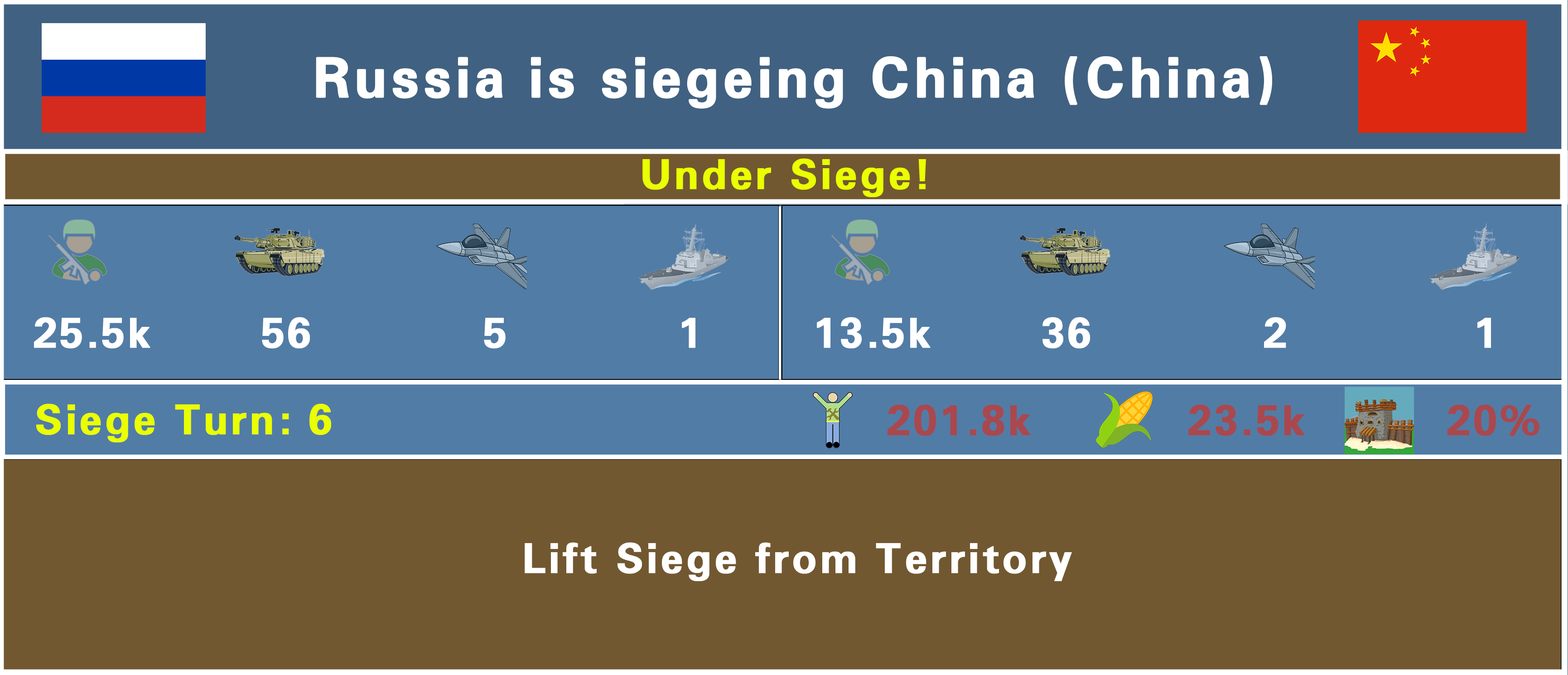
<style>
.page{position:relative;width:1568px;height:675px;background:#725830}
.page>*{position:absolute;margin:0}
.t1{font:54.4px "FreeUniversal-Bold";letter-spacing:0.05em;color:#ffffff;font-weight:bold}
.t2{font:40.8px "FreeUniversal-Bold";letter-spacing:0.05em;color:#eaff00;font-weight:bold}
.t3{font:40.8px "FreeUniversal-Bold";letter-spacing:0.05em;color:#ffffff;font-weight:bold}
.t4{font:40.8px "FreeUniversal-Bold";letter-spacing:0.05em;color:#a9484e;font-weight:bold}
</style>
<div class="page">
<p class="t1" style="left:284px;top:56px;width:989px;height:53px">Russia is attacking China (China)</p>
<p class="t1" style="left:316px;top:56px;width:957px;height:53px">Russia is siegeing China (China)</p>
<p class="t2" style="left:642px;top:158px;width:284px;height:39px">Under Siege!</p>
<p class="t3" style="left:34px;top:317px;width:661px;height:31px">25.5k       56           5           1</p>
<p class="t3" style="left:817px;top:317px;width:674px;height:31px">13.5k       36           2            1</p>
<p class="t2" style="left:36px;top:403px;width:295px;height:39px">Siege Turn: 6</p>
<p class="t4" style="left:888px;top:404px;width:143px;height:32px">201.8k</p>
<p class="t4" style="left:1188px;top:404px;width:117px;height:32px">23.5k</p>
<p class="t4" style="left:1447px;top:404px;width:92px;height:32px">20%</p>
<p class="t4" style="left:1447px;top:404px;width:92px;height:32px">20%</p>
<p class="t3" style="left:525px;top:542px;width:547px;height:39px">Lift Siege from Territory</p>
</div>
